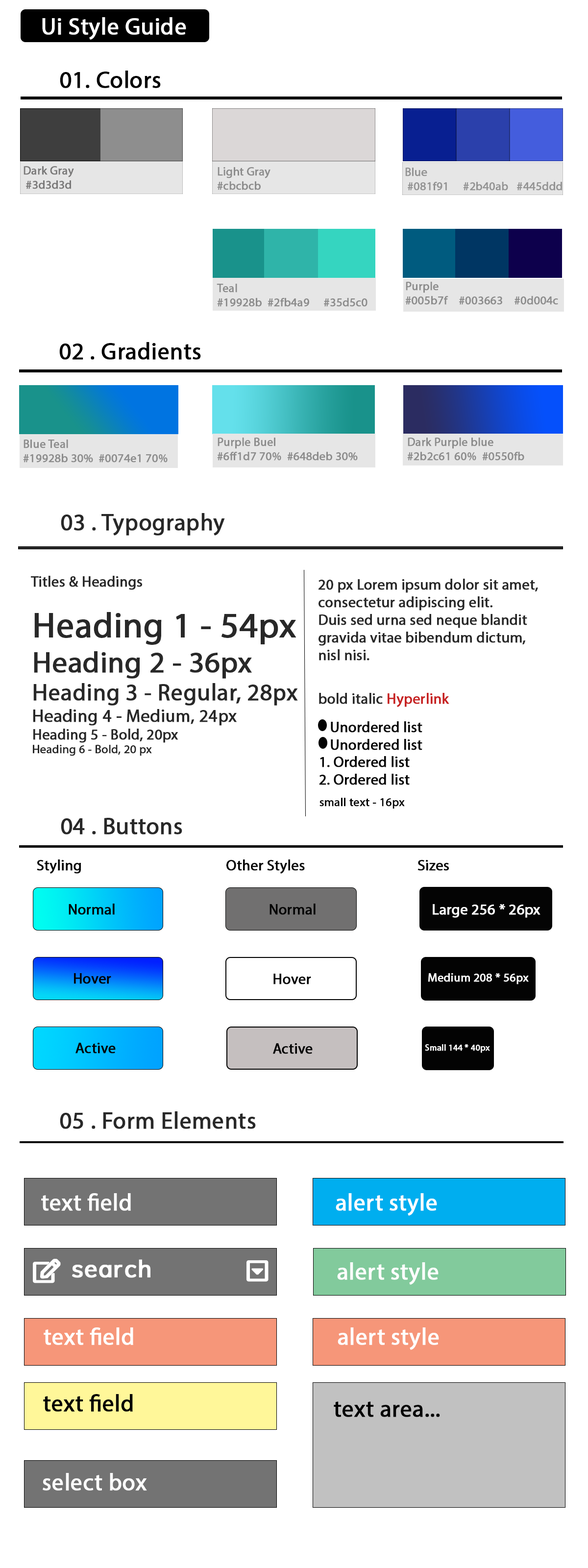
<style>
.page{position:relative;width:588px;height:1568px;background:#ffffff}
.page>*{position:absolute;margin:0}
.t1{font:23.5px "MyriadPro-Regular";color:#ffffff;font-weight:bold}
.t2{font:23.5px "MyriadPro-Regular";color:#000000;font-weight:bold}
.t3{font:11.8px "MyriadPro-Regular";color:#7a7979;font-weight:bold}
.t4{font:11.8px "MyriadPro-Regular";color:#8c8c8c;font-weight:bold}
.t5{font:11.8px "MyriadPro-Regular";color:#939393;font-weight:bold}
.t6{font:23.5px "MyriadPro-Regular";color:#282828;font-weight:bold}
.t7{font:14.7px "MyriadPro-Regular";color:#282828;font-weight:bold}
.t8{font:14.7px "MyriadPro-Regular";color:#c72222;font-weight:bold}
.t9{font:14.7px "MyriadPro-Regular";color:#030303;font-weight:bold}
.t10{font:11.8px "MyriadPro-Regular";color:#030303;font-weight:bold}
.t11{font:14.7px "MyriadPro-Regular";color:#ffffff;font-weight:bold}
.t12{font:11.8px "MyriadPro-Regular";color:#ffffff;font-weight:bold}
.t13{font:8.8px "MyriadPro-Regular";color:#ffffff;font-weight:bold}
.t14{font:23.5px "MyriadPro-Regular";color:#fefefe;font-weight:bold}
.t15{font:23.5px "MyriadPro-Regular";color:#030303;font-weight:bold}
.t16{font:23.5px "MyriadPro-Regular";color:#010101;font-weight:bold}
</style>
<div class="page">
<p class="t1" style="left:42px;top:17px;width:144px;height:23px">Ui Style Guide</p>
<p class="t2" style="left:60px;top:71px;width:101px;height:17px">01. Colors</p>
<p class="t3" style="left:24px;top:166px;width:50px;height:23px">Dark Gray<br> #3d3d3d</p>
<p class="t4" style="left:217px;top:167px;width:53px;height:23px">Light Gray<br>#cbcbcb</p>
<p class="t5" style="left:405px;top:168px;width:157px;height:23px">Blue<br> #081f91     #2b40ab   #445ddd</p>
<p class="t4" style="left:405px;top:282px;width:153px;height:23px">Purple<br>#005b7f    #003663    #0d004c</p>
<p class="t4" style="left:217px;top:284px;width:151px;height:23px">Teal<br>#19928b  #2fb4a9     #35d5c0</p>
<p class="t4" style="left:217px;top:438px;width:141px;height:23px">Purple Buel<br>#6ff1d7 70%  #648deb 30%</p>
<p class="t4" style="left:407px;top:438px;width:117px;height:23px">Dark Purple blue<br>#2b2c61 60%  #0550fb</p>
<p class="t4" style="left:23px;top:440px;width:145px;height:23px">Blue Teal<br>#19928b 30%  #0074e1 70%</p>
<p class="t6" style="left:61px;top:513px;width:164px;height:23px">03 . Typography</p>
<p class="t7" style="left:31px;top:576px;width:111px;height:14px">Titles &amp; Headings</p>
<p class="t7" style="left:318px;top:579px;width:220px;height:82px">20 px Lorem ipsum dolor sit amet,<br>consectetur adipiscing elit.<br>Duis sed urna sed neque blandit <br>gravida vitae bibendum dictum, <br>nisl nisi.</p>
<p class="t7" style="left:319px;top:693px;width:130px;height:14px">bold italic <span class="t8">Hyperlink</span></p>
<p class="t9" style="left:331px;top:721px;width:91px;height:29px">Unordered list <br>  Unordered list</p>
<p class="t9" style="left:319px;top:756px;width:91px;height:29px">1. Ordered list <br>2. Ordered list</p>
<p class="t10" style="left:319px;top:798px;width:86px;height:11px">small text - 16px</p>
<p class="t6" style="left:61px;top:818px;width:121px;height:16px">04 . Buttons</p>
<p class="t9" style="left:37px;top:859px;width:412px;height:15px">Styling                                         Other Styles                                Sizes</p>
<p class="t9" style="left:69px;top:904px;width:46px;height:11px">Normal</p>
<p class="t9" style="left:270px;top:904px;width:46px;height:11px">Normal</p>
<p class="t11" style="left:433px;top:904px;width:107px;height:14px">Large 256 * 26px</p>
<p class="t9" style="left:74px;top:973px;width:37px;height:11px">Hover</p>
<p class="t9" style="left:273px;top:974px;width:38px;height:10px">Hover</p>
<p class="t12" style="left:428px;top:973px;width:101px;height:11px">Medium 208 * 56px</p>
<p class="t9" style="left:75px;top:1043px;width:41px;height:11px">Active</p>
<p class="t9" style="left:273px;top:1043px;width:40px;height:11px">Active</p>
<p class="t13" style="left:425px;top:1044px;width:65px;height:9px">Small 144 * 40px</p>
<p class="t6" style="left:60px;top:1111px;width:196px;height:18px">05 . Form Elements</p>
<p class="t1" style="left:41px;top:1193px;width:90px;height:18px">text field</p>
<p class="t14" style="left:336px;top:1193px;width:101px;height:23px">alert style</p>
<p class="t14" style="left:337px;top:1262px;width:102px;height:23px">alert style</p>
<p class="t1" style="left:44px;top:1327px;width:89px;height:18px">text field</p>
<p class="t14" style="left:338px;top:1327px;width:101px;height:23px">alert style</p>
<p class="t15" style="left:43px;top:1394px;width:90px;height:18px">text field</p>
<p class="t16" style="left:334px;top:1401px;width:106px;height:16px">text area...</p>
<p class="t14" style="left:43px;top:1473px;width:104px;height:18px">select box</p>
</div>
